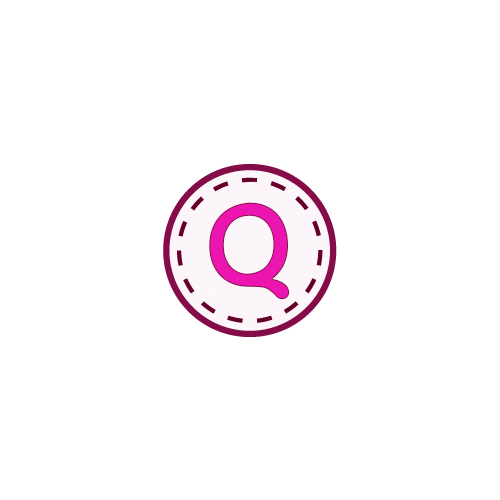
<style>
.page{position:relative;width:500px;height:500px;background:#ffffff}
.page>*{position:absolute;margin:0}
.t1{font:110px "MaplestoryLight";color:#ed15b0;font-weight:bold}
</style>
<div class="page">
<p class="t1" style="left:209px;top:202px;width:81px;height:98px">Q</p>
</div>
